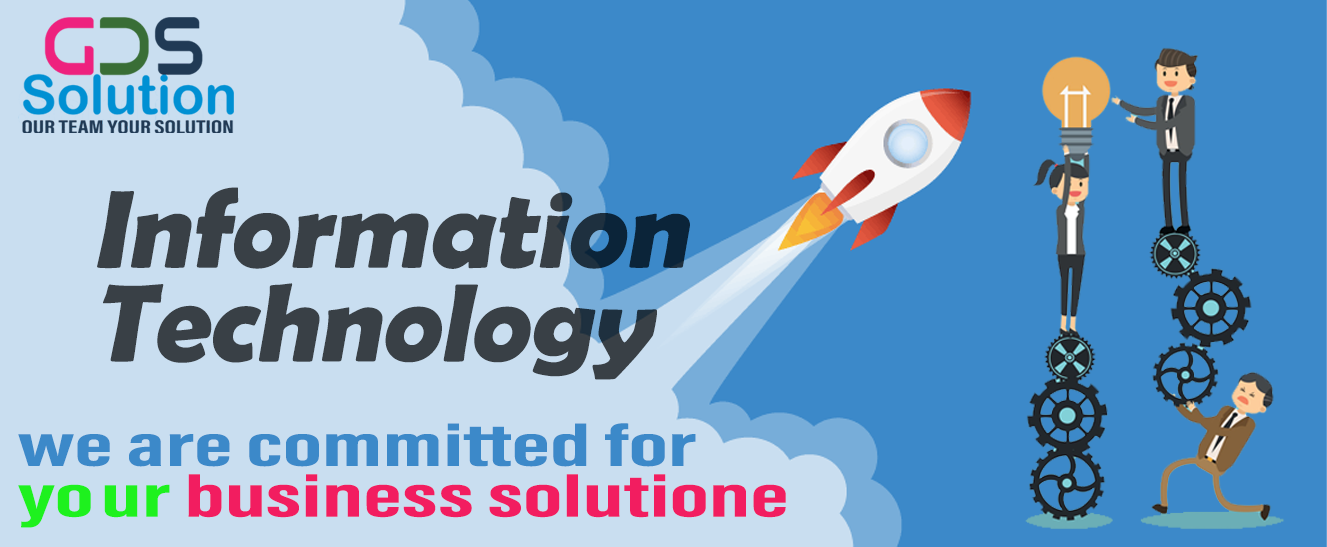
<style>
.page{position:relative;width:1327px;height:547px;background:#3c89c9}
.page>*{position:absolute;margin:0}
.t1{font:111.4px/93.7px "BerlinSansFBDemi-Bold";color:#394046;font-style:italic}
.t2{font:60.4px/15.1px "AcuminConcept-ExtraCondensedBold";color:#3c89c9;font-style:italic;scale:1.78 1}
.t3{font:60.4px/50.8px "AcuminConcept-ExtraCondensedBold";color:#1ef11e;font-style:italic;scale:1.78 1}
.t4{font:60.4px/50.8px "AcuminConcept-ExtraCondensedBold";letter-spacing:0.06em;color:#1ef11e;font-style:italic;scale:1.78 1}
.t5{font:60.4px/50.8px "AcuminConcept-ExtraCondensedBold";color:#f21d60;font-style:italic;scale:1.78 1}
</style>
<div class="page">
<p class="t1" style="left:97px;top:187px;width:593px;height:193px">Information<br>Technology</p>
<p class="t2" style="left:18px;top:423px;width:768px;height:105px">we are committed for <br><span class="t3">y</span><span class="t4">o</span><span class="t3">ur </span><span class="t5">business solutione</span></p>
</div>
